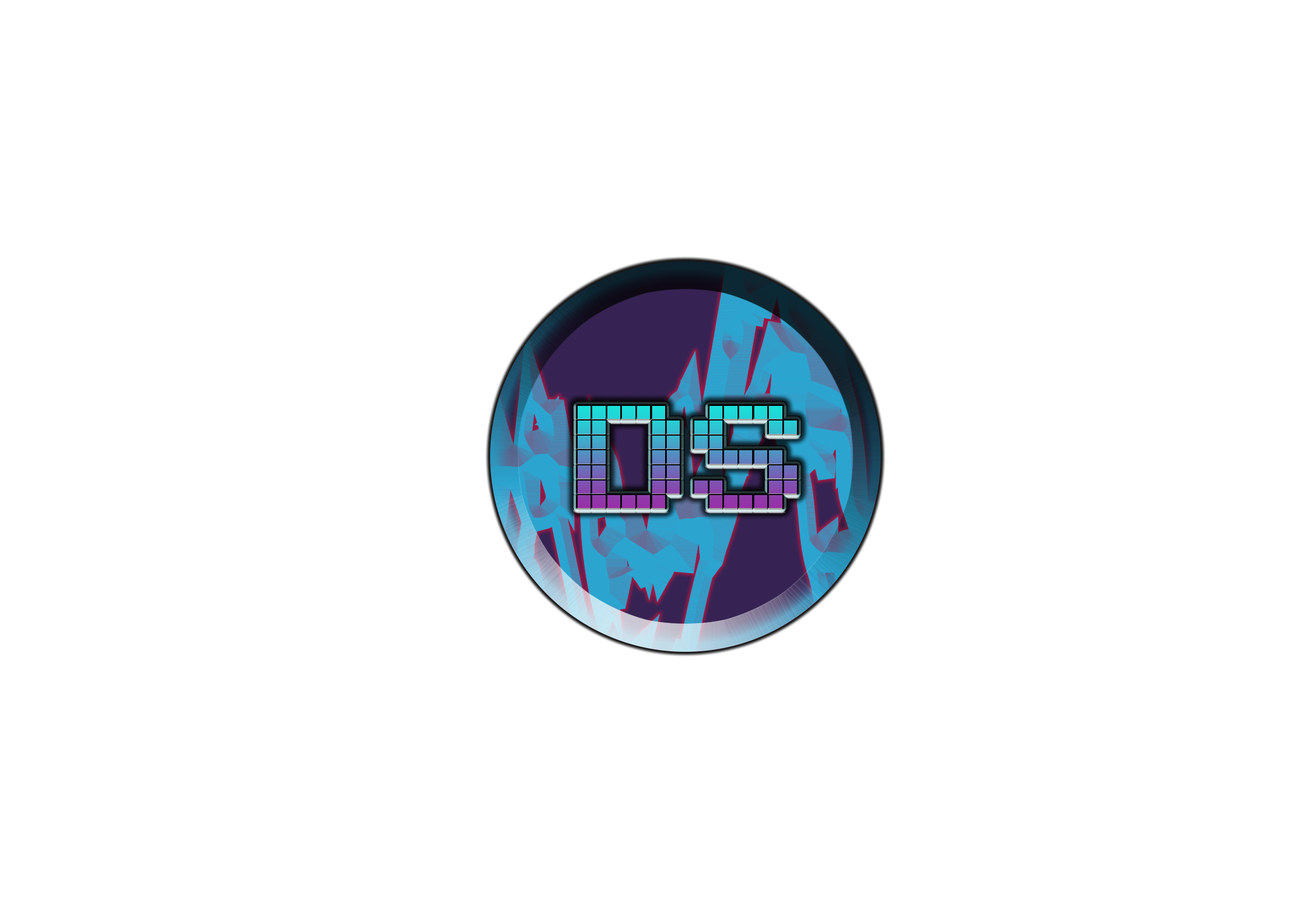
<style>
.page{position:relative;width:1313px;height:908px;background:#ffffff}
.page>*{position:absolute;margin:0}
.t1{font:225.2px "Arcade"}
</style>
<div class="page">
<p class="t1" style="left:578px;top:406px;width:219px;height:102px">DS</p>
</div>
